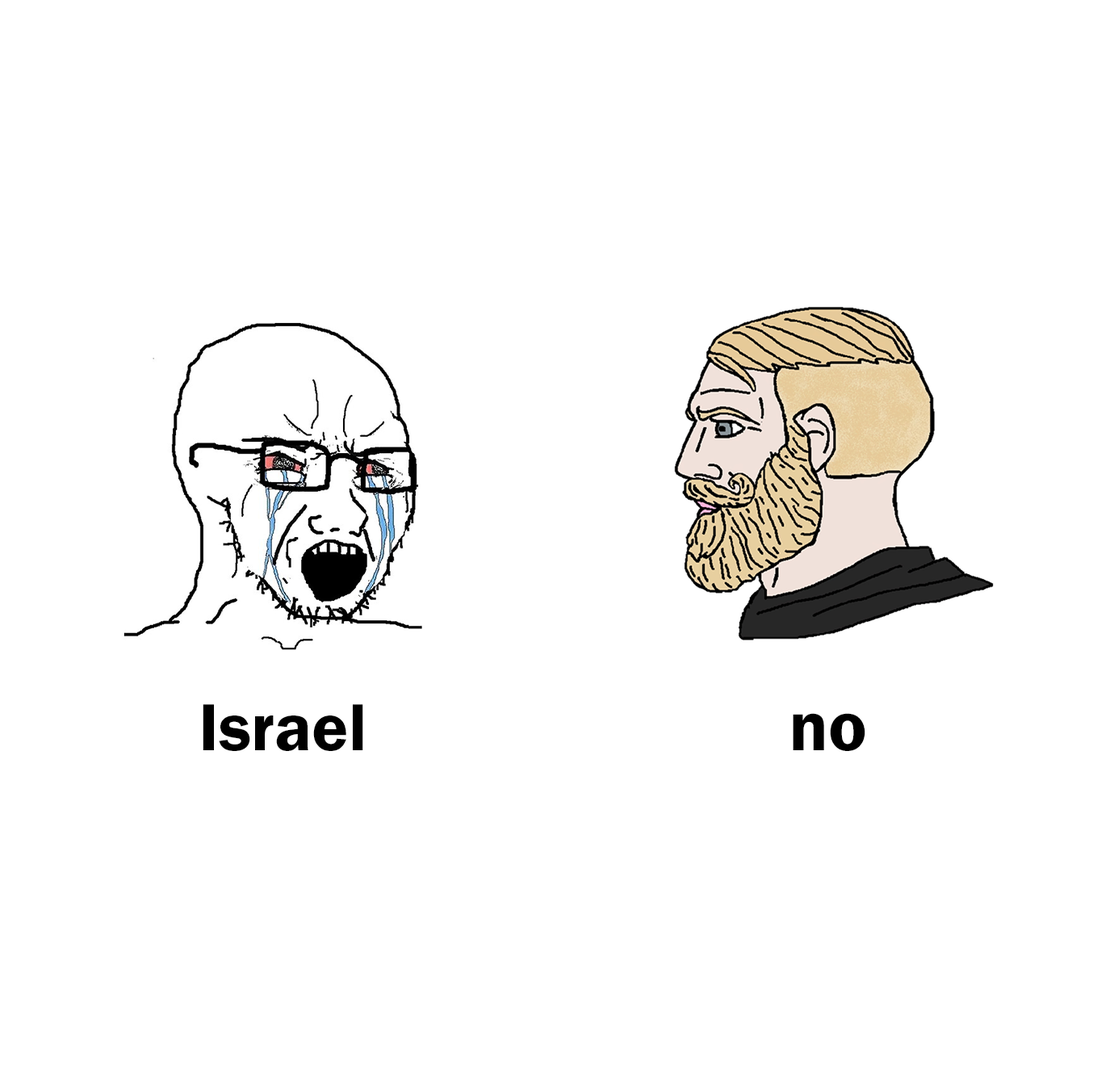
<style>
.page{position:relative;width:1093px;height:1091px;background:#ffffff}
.page>*{position:absolute;margin:0}
.t1{font:68.6px "FranklinGothic-Demi";color:#000000}
.t2{font:72.4px "FranklinGothic-Demi";color:#000000}
</style>
<div class="page">
<p class="t1" style="left:203px;top:704px;width:160px;height:47px">Israel</p>
<p class="t2" style="left:793px;top:713px;width:73px;height:38px">no</p>
</div>
